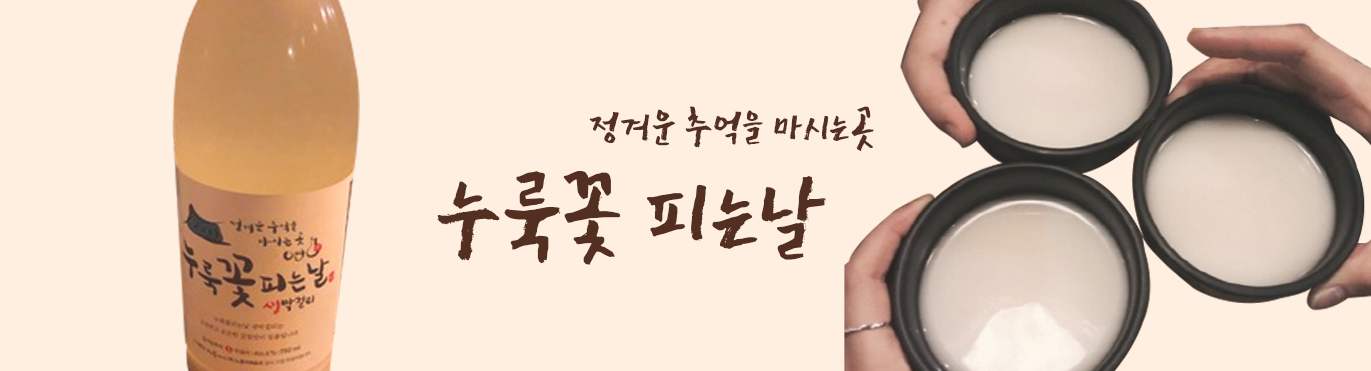
<style>
.page{position:relative;width:1371px;height:371px;background:#ffefe1}
.page>*{position:absolute;margin:0}
.t1{font:48px "KoreaDokdo";color:#532f21}
.t2{font:112.7px "KoreaDokdo";color:#532f21}
</style>
<div class="page">
<p class="t1" style="left:589px;top:106px;width:285px;height:46px">정겨운 추억을 마시는곳</p>
<p class="t2" style="left:437px;top:171px;width:390px;height:95px">누룩꽃 피는날</p>
</div>
